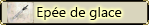
<style>
.page{position:relative;width:149px;height:25px;background:#d9d5bd}
.page>*{position:absolute;margin:0}
.t1{font:14px "LaoUI";color:#000000}
</style>
<div class="page">
<p class="t1" style="left:37px;top:7px;width:85px;height:13px">Epée de glace</p>
</div>
